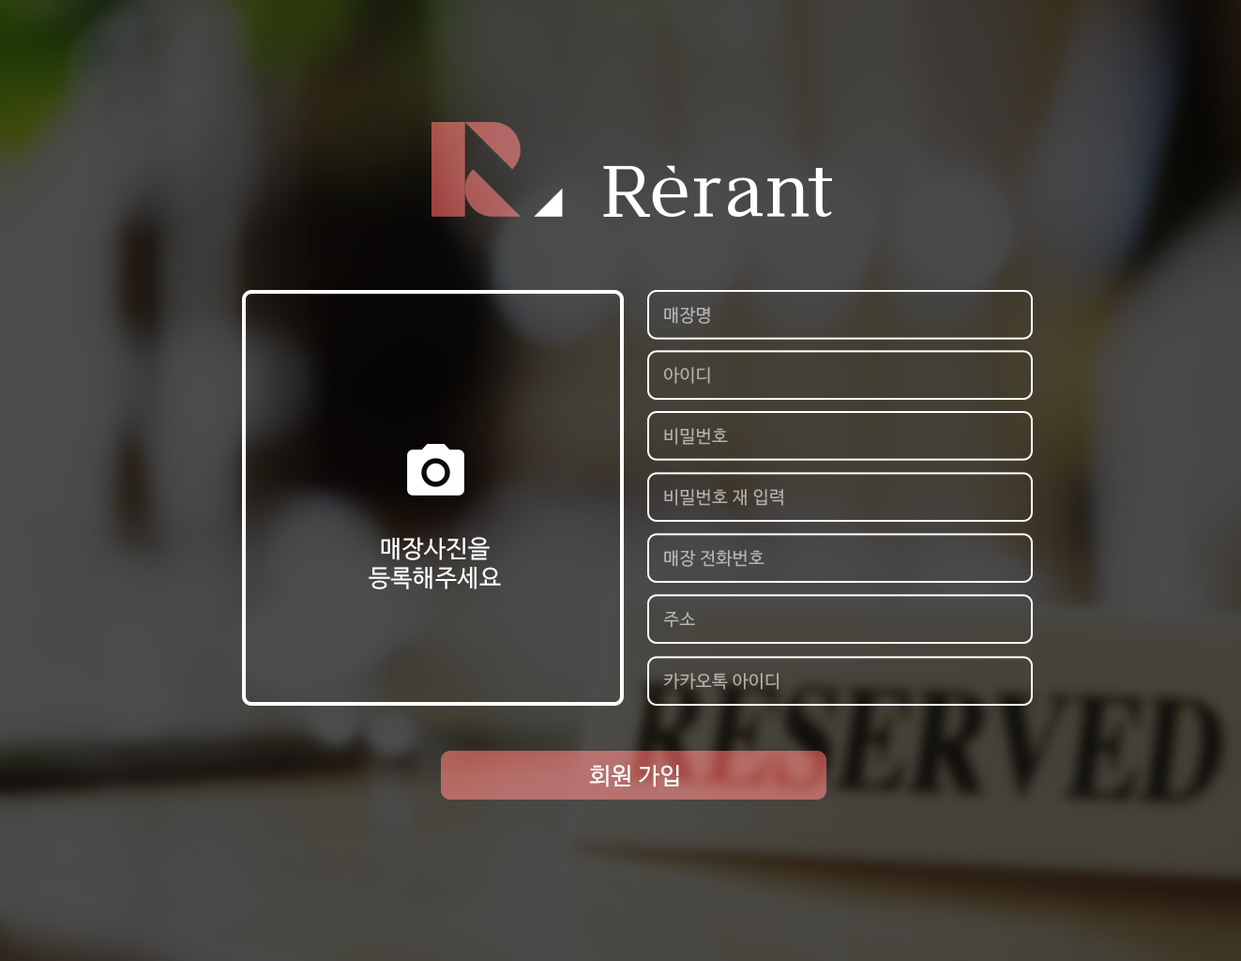
<style>
.page{position:relative;width:1241px;height:961px}
.page>*{position:absolute;margin:0}
.t1{font:17.6px "NanumBarunGothic";letter-spacing:0.025em;color:#b5b5b4}
.t2{font:17.6px "NanumBarunGothic";letter-spacing:0.025em;color:#b4b3af}
.t3{font:17.6px "NanumBarunGothic";letter-spacing:0.025em;color:#b3b1ae}
.t4{font:17.6px "NanumBarunGothic";letter-spacing:0.025em;color:#b2b1af}
.t5{font:24.1px/29.3px "NanumBarunGothic";letter-spacing:0.025em;color:#ffffff}
.t6{font:17.6px "NanumBarunGothic";letter-spacing:0.025em;color:#b6b6b6}
.t7{font:17.6px "NanumBarunGothic";letter-spacing:0.025em;color:#b6b5b3}
.t8{font:17.6px "NanumBarunGothic";letter-spacing:0.025em;color:#b3b2af}
.t9{font:23.7px "NanumBarunGothic";letter-spacing:0.025em;color:#ffffff}
</style>
<div class="page">
<p class="t1" style="left:664px;top:307px;width:46px;height:17px">매장명</p>
<p class="t2" style="left:664px;top:367px;width:46px;height:17px">아이디</p>
<p class="t3" style="left:664px;top:428px;width:64px;height:17px">비밀번호</p>
<p class="t4" style="left:664px;top:489px;width:119px;height:17px">비밀번호 재 입력</p>
<p class="t5" style="left:369px;top:537px;width:132px;height:52px;text-align:center">매장사진을<br>등록해주세요</p>
<p class="t6" style="left:664px;top:550px;width:101px;height:17px">매장 전화번호</p>
<p class="t7" style="left:663px;top:612px;width:32px;height:16px">주소</p>
<p class="t8" style="left:663px;top:673px;width:116px;height:17px">카카오톡 아이디</p>
<p class="t9" style="left:589px;top:765px;width:90px;height:22px">회원 가입</p>
</div>
